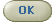
<style>
.page{position:relative;width:54px;height:22px}
.page>*{position:absolute;margin:0}
.t1{font:11px "Verdana-Bold";color:#336699}
</style>
<div class="page">
<p class="t1" style="left:19px;top:6px;width:15px;height:8px">OK</p>
</div>
